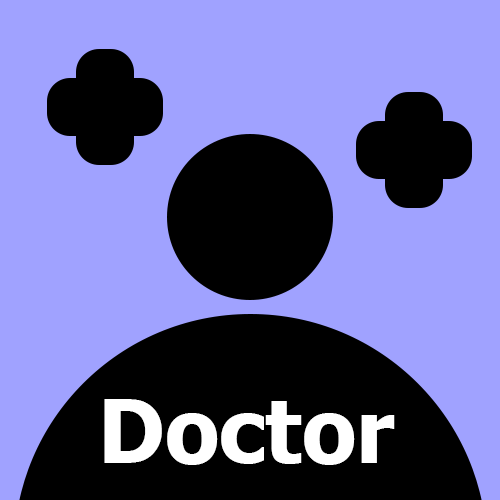
<style>
.page{position:relative;width:500px;height:500px;background:#a0a2ff}
.page>*{position:absolute;margin:0}
.t1{font:87.8px "Tahoma-Bold";color:#ffffff}
</style>
<div class="page">
<p class="t1" style="left:104px;top:399px;width:291px;height:66px">Doctor</p>
</div>
